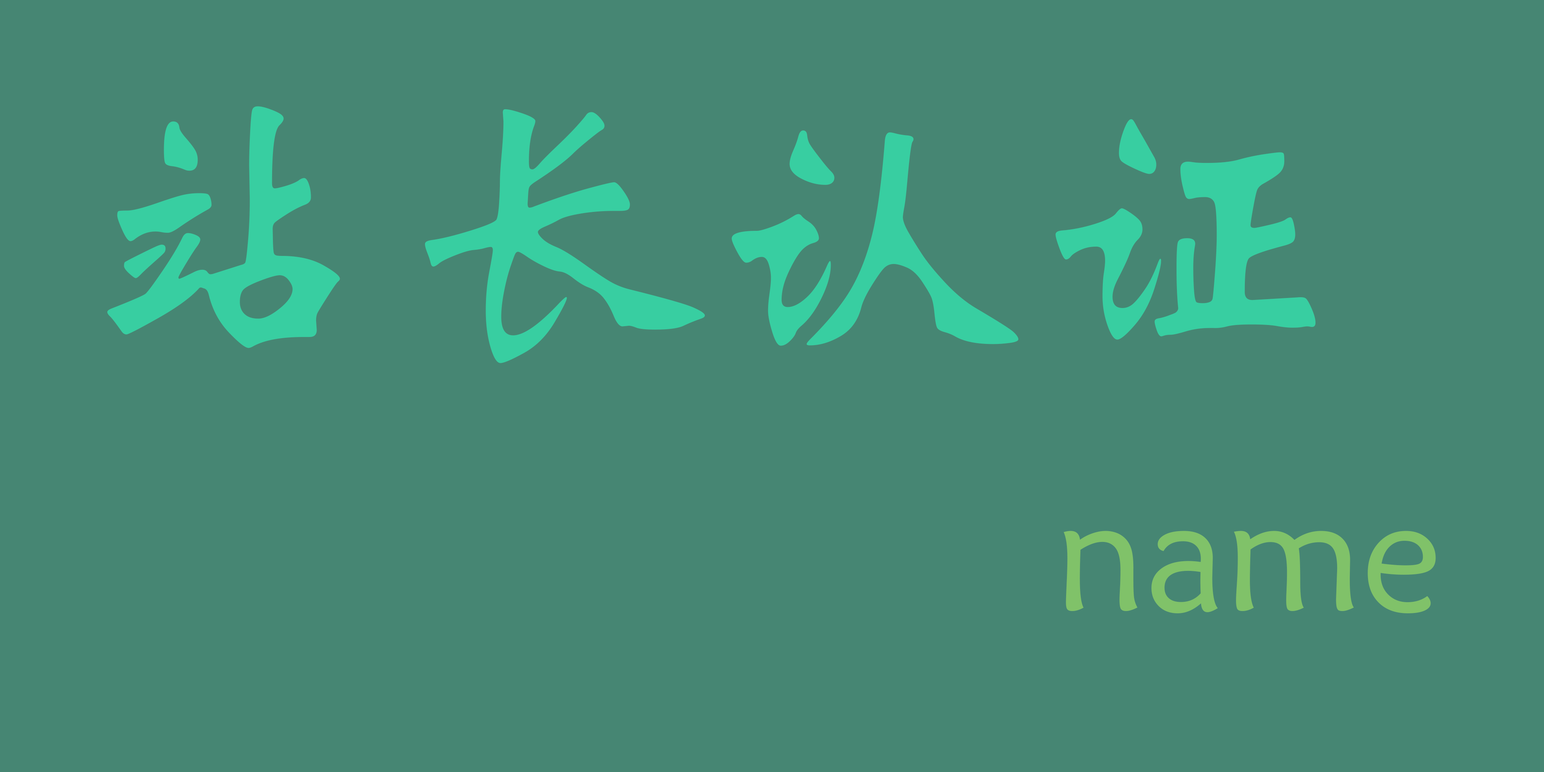
<style>
.page{position:relative;width:1544px;height:772px;background:#468673}
.page>*{position:absolute;margin:0}
.t1{font:321.7px "STXinwei";color:#38cea1}
.t2{font:160.9px "STXinwei";color:#80c269}
</style>
<div class="page">
<p class="t1" style="left:107px;top:106px;width:1209px;height:257px">站长认证</p>
<p class="t2" style="left:1064px;top:531px;width:372px;height:82px">name</p>
</div>
